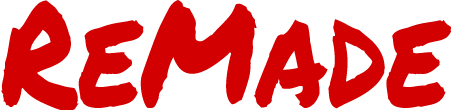
<style>
.page{position:relative;width:451px;height:110px;background:#ffffff}
.page>*{position:absolute;margin:0}
.t1{font:144px "PermanentMarker-Regular";color:#d20000;scale:0.83 1}
</style>
<div class="page">
<p class="t1" style="left:1px;top:0px;width:450px;height:112px">ReMade</p>
</div>
